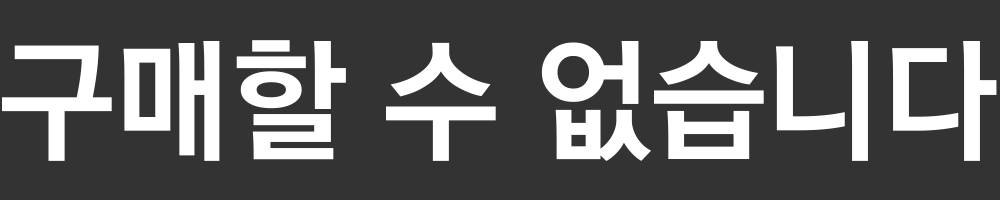
<style>
.page{position:relative;width:1000px;height:200px;background:#333333}
.page>*{position:absolute;margin:0}
.t1{font:134.4px "KoreanGD16-R";letter-spacing:-0.02em;color:#ffffff}
</style>
<div class="page">
<p class="t1" style="left:2px;top:40px;width:995px;height:121px">구매할 수 없습니다</p>
</div>
